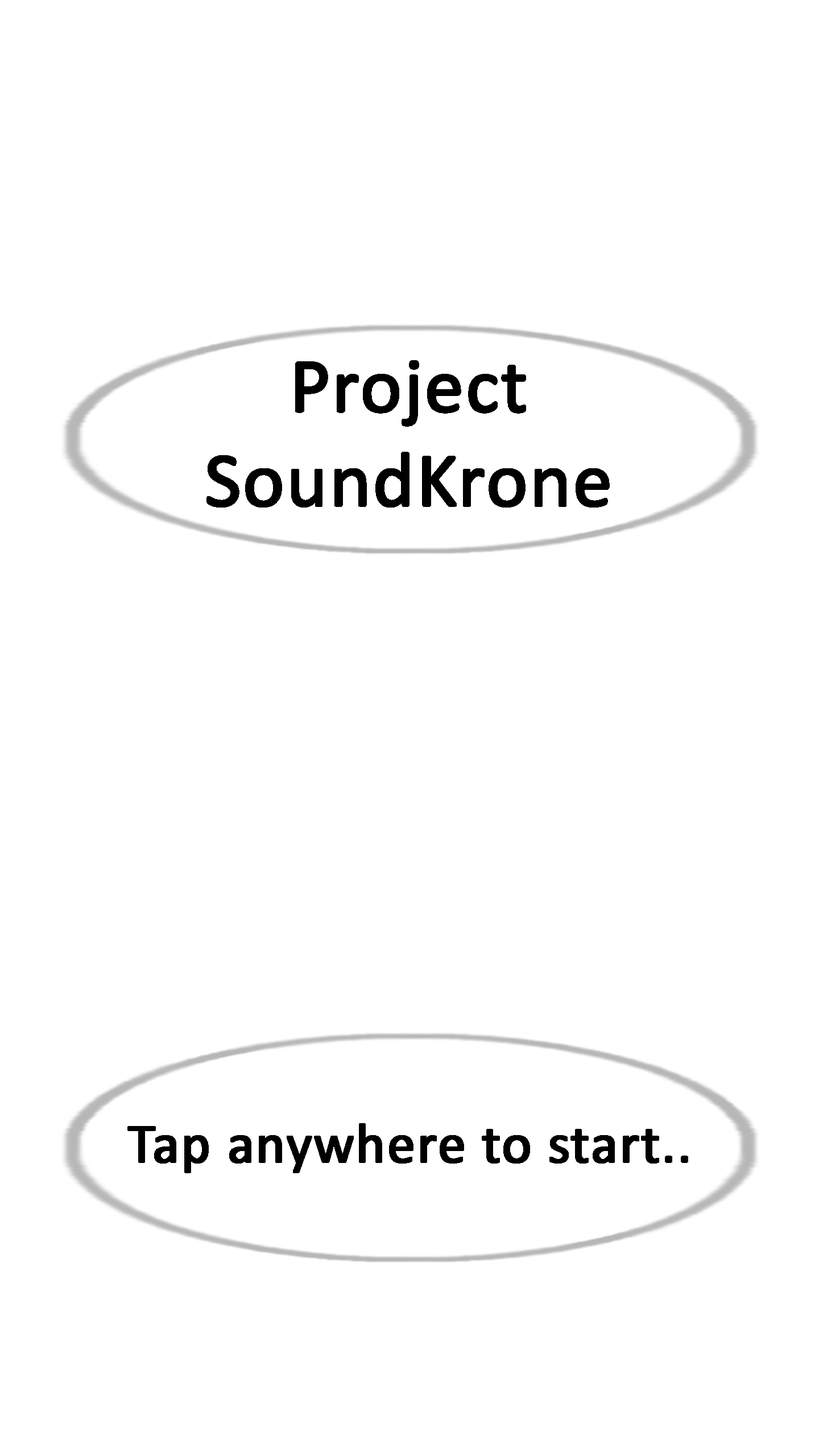
<style>
.page{position:relative;width:819px;height:1456px;background:#ffffff}
.page>*{position:absolute;margin:0}
.t1{font:78.5px "Calibri";color:#000000;font-weight:bold}
.t2{font:56.9px "Calibri";color:#000000;font-weight:bold}
</style>
<div class="page">
<p class="t1" style="left:206px;top:360px;width:404px;height:147px;text-align:center">Project<br>SoundKrone</p>
<p class="t2" style="left:127px;top:1123px;width:561px;height:50px">Tap anywhere to start..</p>
</div>
